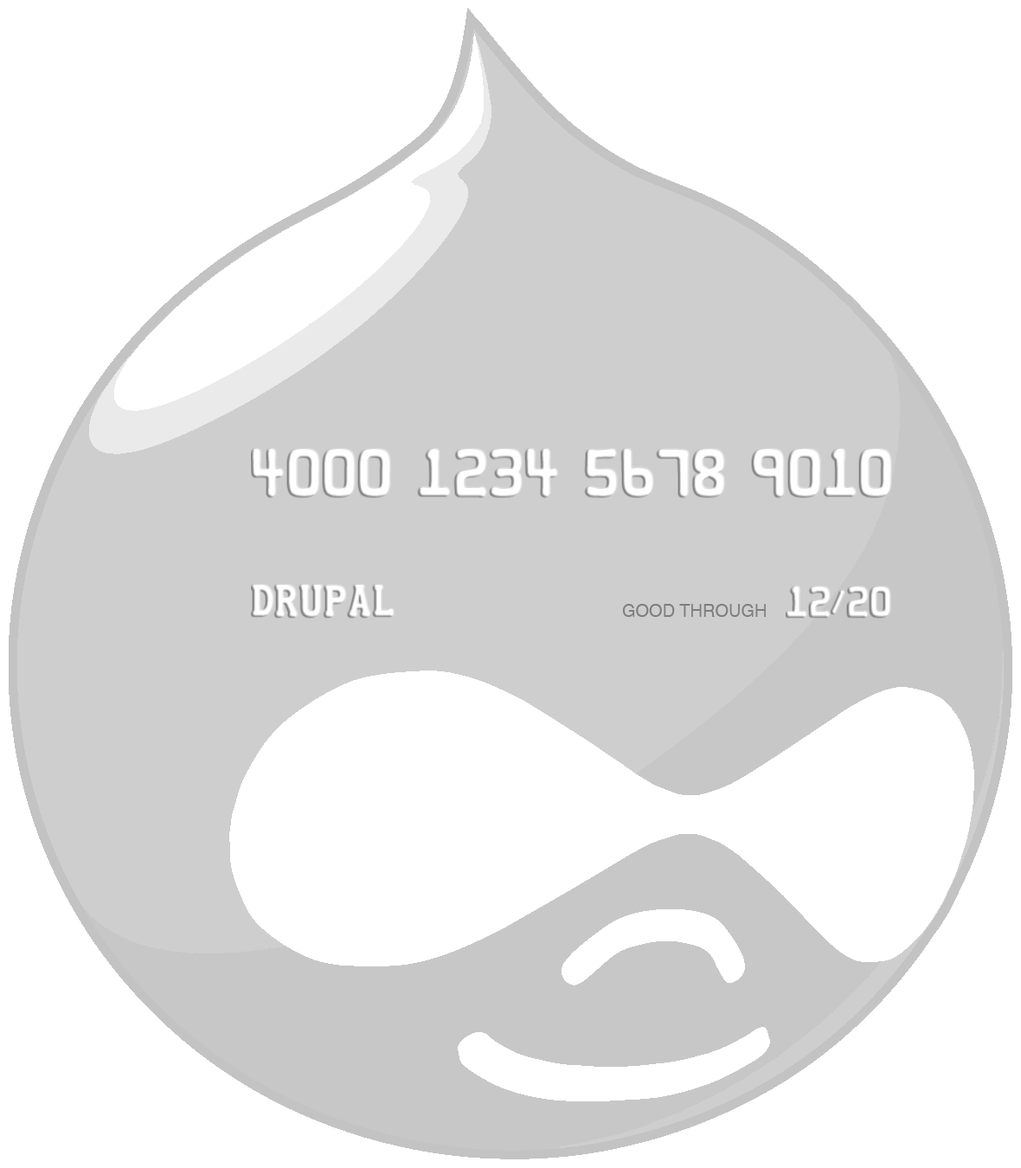
<style>
.page{position:relative;width:1021px;height:1168px;background:#ffffff}
.page>*{position:absolute;margin:0}
.t1{font:43.3px "CreditCard";color:#ffffff}
.t2{font:27.7px "CreditCard";color:#ffffff}
.t3{font:17.3px "Helvetica";color:#7e7e7e}
</style>
<div class="page">
<p class="t1" style="left:252px;top:449px;width:638px;height:48px">4000 1234 5678 9010</p>
<p class="t1" style="left:252px;top:585px;width:142px;height:32px">DRUPAL</p>
<p class="t2" style="left:786px;top:587px;width:103px;height:30px">12/20</p>
<p class="t3" style="left:622px;top:604px;width:144px;height:13px">GOOD THROUGH</p>
</div>
